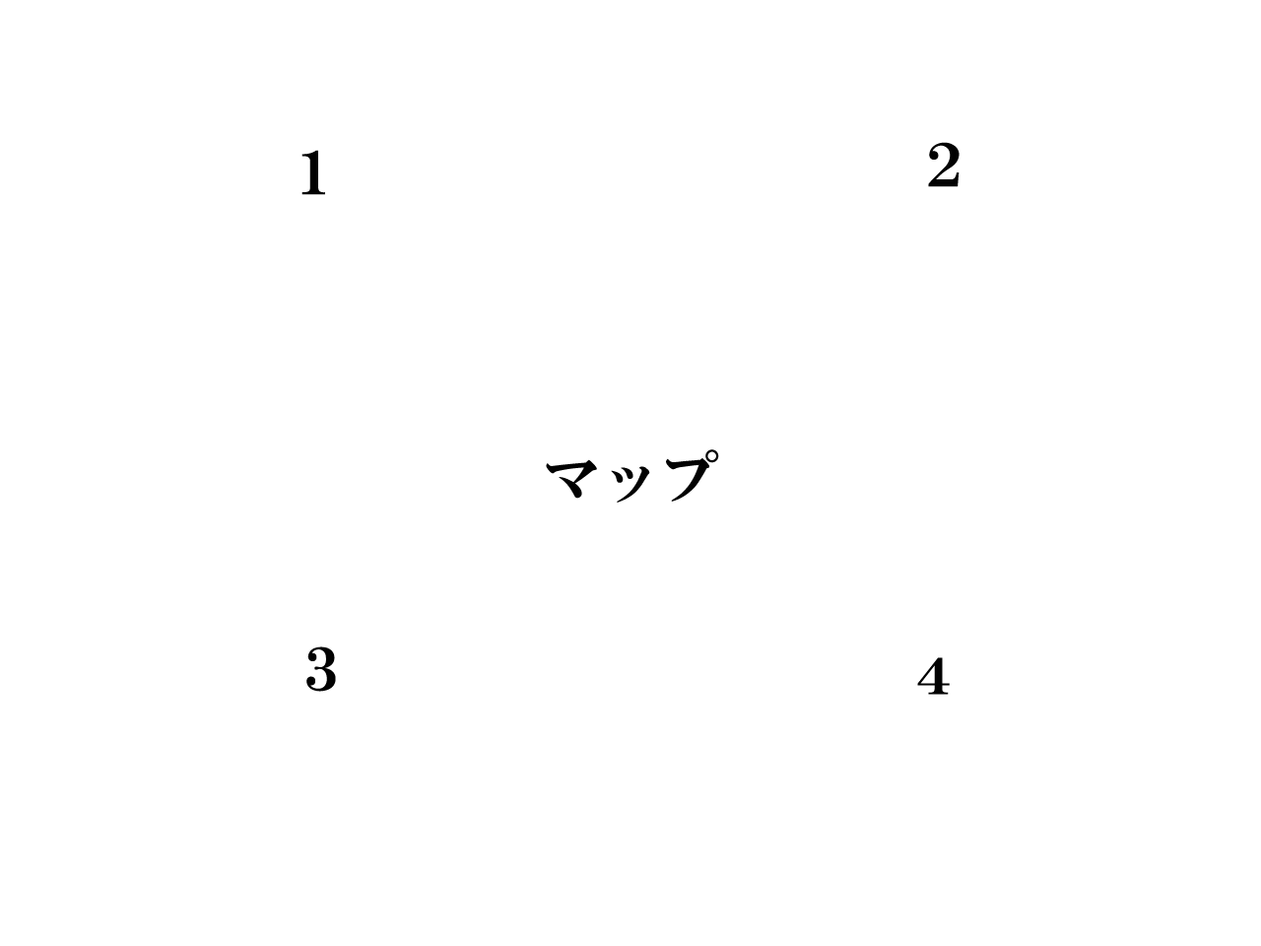
<style>
.page{position:relative;width:1261px;height:946px;background:#ffffff}
.page>*{position:absolute;margin:0}
.t1{font:59.1px "HGMinchoE";color:#020202}
.t2{font:49.3px "HGMinchoE";color:#020202;scale:1.2 1}
</style>
<div class="page">
<p class="t1" style="left:301px;top:150px;width:24px;height:45px">１</p>
<p class="t1" style="left:928px;top:142px;width:31px;height:45px">２</p>
<p class="t1" style="left:546px;top:449px;width:173px;height:53px">マップ</p>
<p class="t1" style="left:306px;top:646px;width:30px;height:46px">３</p>
<p class="t2" style="left:917px;top:657px;width:33px;height:37px">４</p>
</div>
